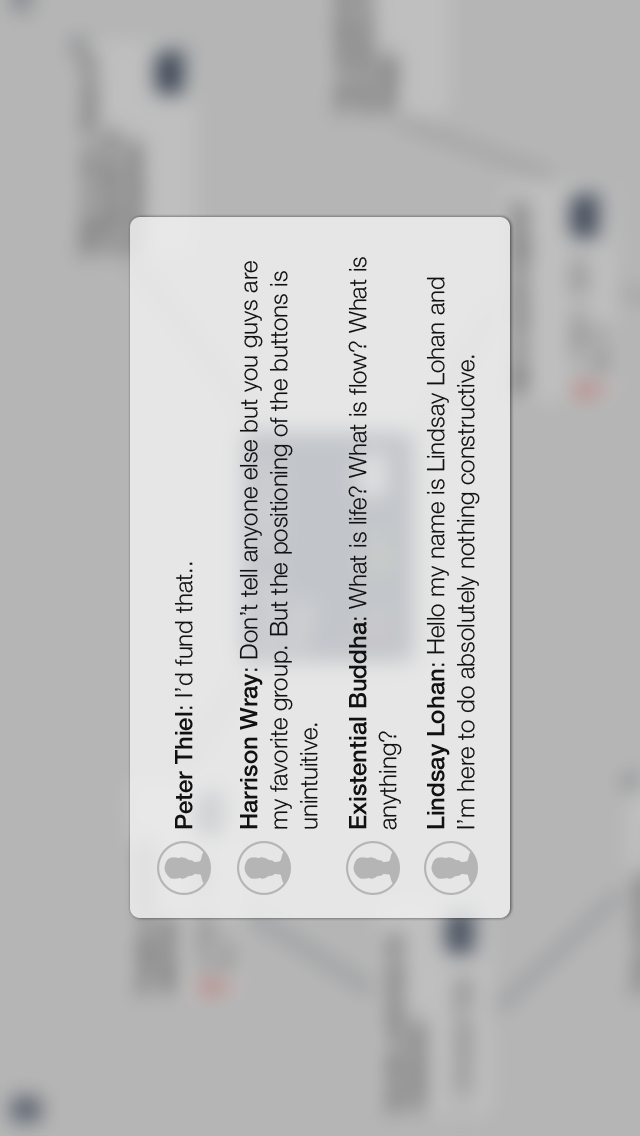
<style>
.page{position:relative;width:640px;height:1136px;background:#b5b5b5}
.page>*{position:absolute;margin:0}
.t1{font:24px "HelveticaNeue-Light";color:#111111}
.t2{font:24px "HelveticaNeue-Medium";color:#111111}
</style>
<div class="page">
<p class="t1" style="left:348px;top:257px;width:54px;height:573px;rotate:-90deg"><span class="t2">Existential Buddha</span>: What is life? What is flow? What is anything?</p>
<p class="t1" style="left:239px;top:261px;width:79px;height:568px;rotate:-90deg"><span class="t2">Harrison Wray</span>: Don’t tell anyone else but you guys are my favorite group. But the positioning of the buttons is unintuitive.</p>
<p class="t1" style="left:426px;top:277px;width:54px;height:552px;rotate:-90deg"><span class="t2">Lindsay Lohan</span>: Hello my name is Lindsay Lohan and I’m here to do absolutely nothing constructive.</p>
<p class="t1" style="left:174px;top:562px;width:19px;height:267px;rotate:-90deg"><span class="t2">Peter Thiel</span>: I’d fund that..</p>
</div>
